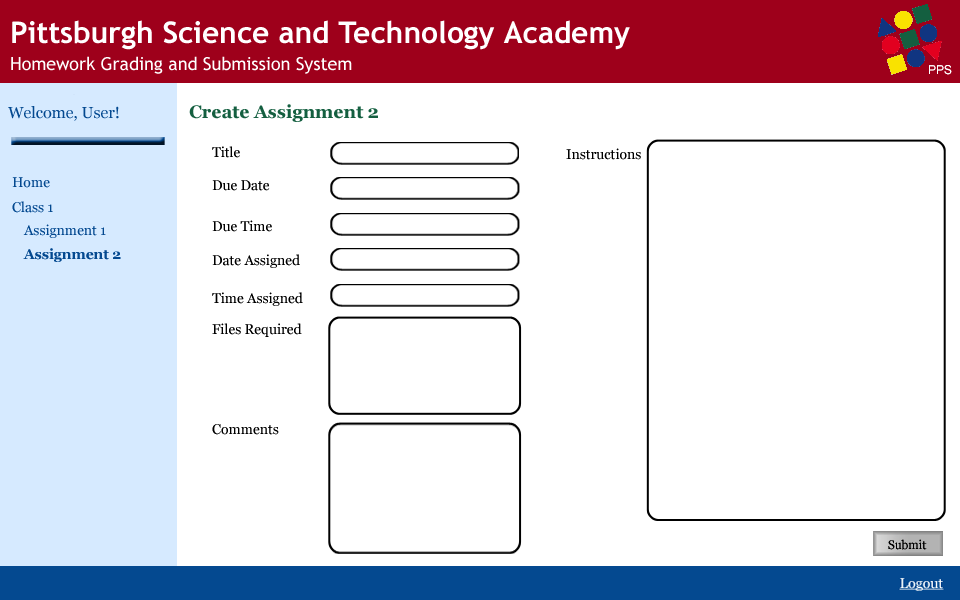
<style>
.page{position:relative;width:960px;height:600px;background:#ffffff}
.page>*{position:absolute;margin:0}
.t1{font:15.9px "Georgia";color:#044990}
.t2{font:17.9px "Georgia-Bold";color:#145f40}
.t3{font:13.9px "Georgia";color:#000000}
.t4{font:13.9px "Georgia";color:#044990}
.t5{font:13.9px "Georgia-Bold";color:#044990}
</style>
<div class="page">
<p class="t1" style="left:8px;top:106px;width:111px;height:15px">Welcome, User!</p>
<p class="t2" style="left:189px;top:104px;width:189px;height:18px">Create Assignment 2</p>
<p class="t3" style="left:212px;top:146px;width:91px;height:289px">Title<br><br>Due Date<br><br><br>Due Time<br><br>Date Assigned<br><br><br><br>Time Assigned<br><br><br><br>Files Required<br><br><br><br><br><br>Comments</p>
<p class="t3" style="left:566px;top:148px;width:75px;height:12px">Instructions</p>
<p class="t4" style="left:12px;top:177px;width:38px;height:11px">Home</p>
<p class="t4" style="left:12px;top:201px;width:41px;height:12px">Class 1</p>
<p class="t4" style="left:23px;top:224px;width:83px;height:14px">Assignment 1</p>
<p class="t5" style="left:23px;top:248px;width:98px;height:14px">Assignment 2</p>
</div>
